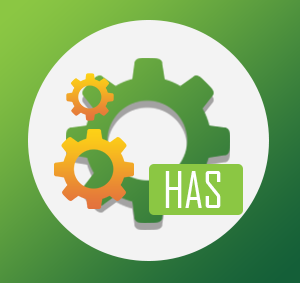
<style>
.page{position:relative;width:300px;height:283px;background:#f3f3f3}
.page>*{position:absolute;margin:0}
.t1{font:48.1px "AgencyFB-Reg";color:#ffffff}
</style>
<div class="page">
<p class="t1" style="left:165px;top:171px;width:56px;height:37px">HAS</p>
</div>
